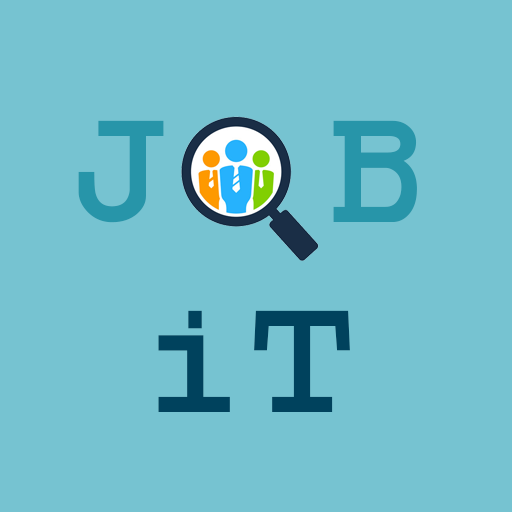
<style>
.page{position:relative;width:512px;height:512px;background:#76c3d1}
.page>*{position:absolute;margin:0}
.t1{font:180px/95px "MonospaceBold";letter-spacing:0.1em;color:#2795a9}
.t2{font:180px/95px "MonospaceBold";color:#00425d}
</style>
<div class="page">
<p class="t1" style="left:78px;top:120px;width:339px;height:292px;text-align:center">J B <br><span class="t2"><br>iT</span></p>
</div>
